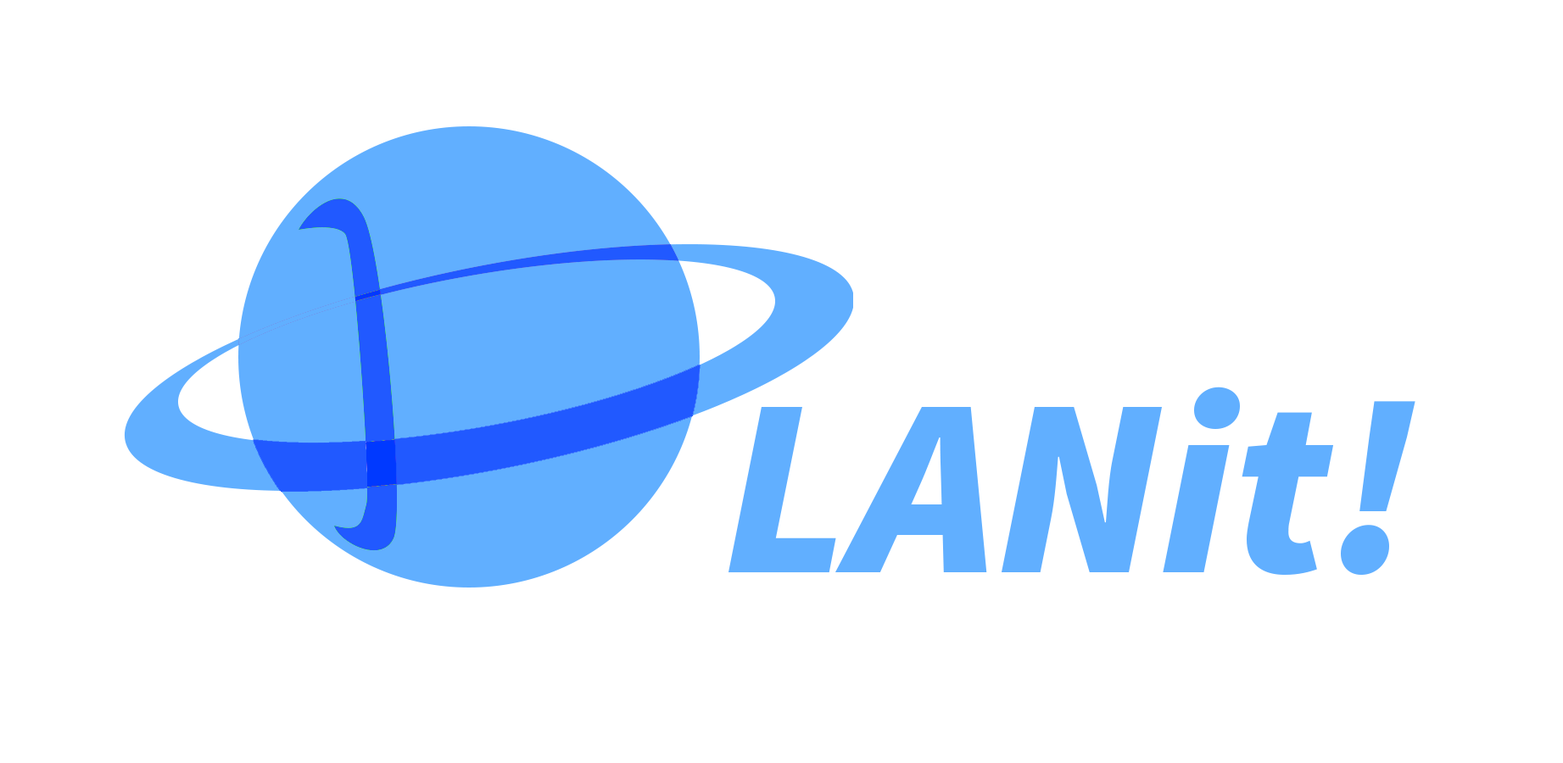
<style>
.page{position:relative;width:1563px;height:763px;background:#ffffff}
.page>*{position:absolute;margin:0}
.t1{font:254.4px "SourceSansPro-BlackIt";color:#61afff}
</style>
<div class="page">
<p class="t1" style="left:728px;top:387px;width:687px;height:188px">LANit!</p>
</div>
